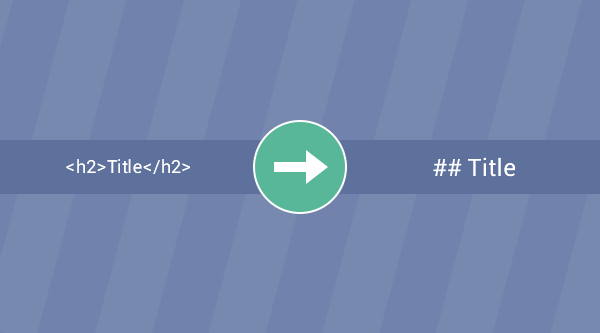
<style>
.page{position:relative;width:600px;height:333px;background:#7183ac}
.page>*{position:absolute;margin:0}
.t1{font:18px "Roboto-Regular";color:#ffffff}
.t2{font:24px "Roboto-Regular";color:#ffffff}
</style>
<div class="page">
<p class="t1" style="left:66px;top:159px;width:124px;height:15px">&lt;h2&gt;Title&lt;/h2&gt;</p>
<p class="t2" style="left:433px;top:157px;width:82px;height:20px">## Title</p>
</div>
